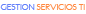
<style>
.page{position:relative;width:86px;height:14px;background:#ffffff}
.page>*{position:absolute;margin:0}
.t1{font:10px "Eurofurenceregular";color:#ff8942}
.t2{font:10px "Eurofurenceregular";color:#617efa}
</style>
<div class="page">
<p class="t1" style="left:0px;top:4px;width:85px;height:6px"><span class="t2">GESTION </span>SERVICIOS TI</p>
</div>
